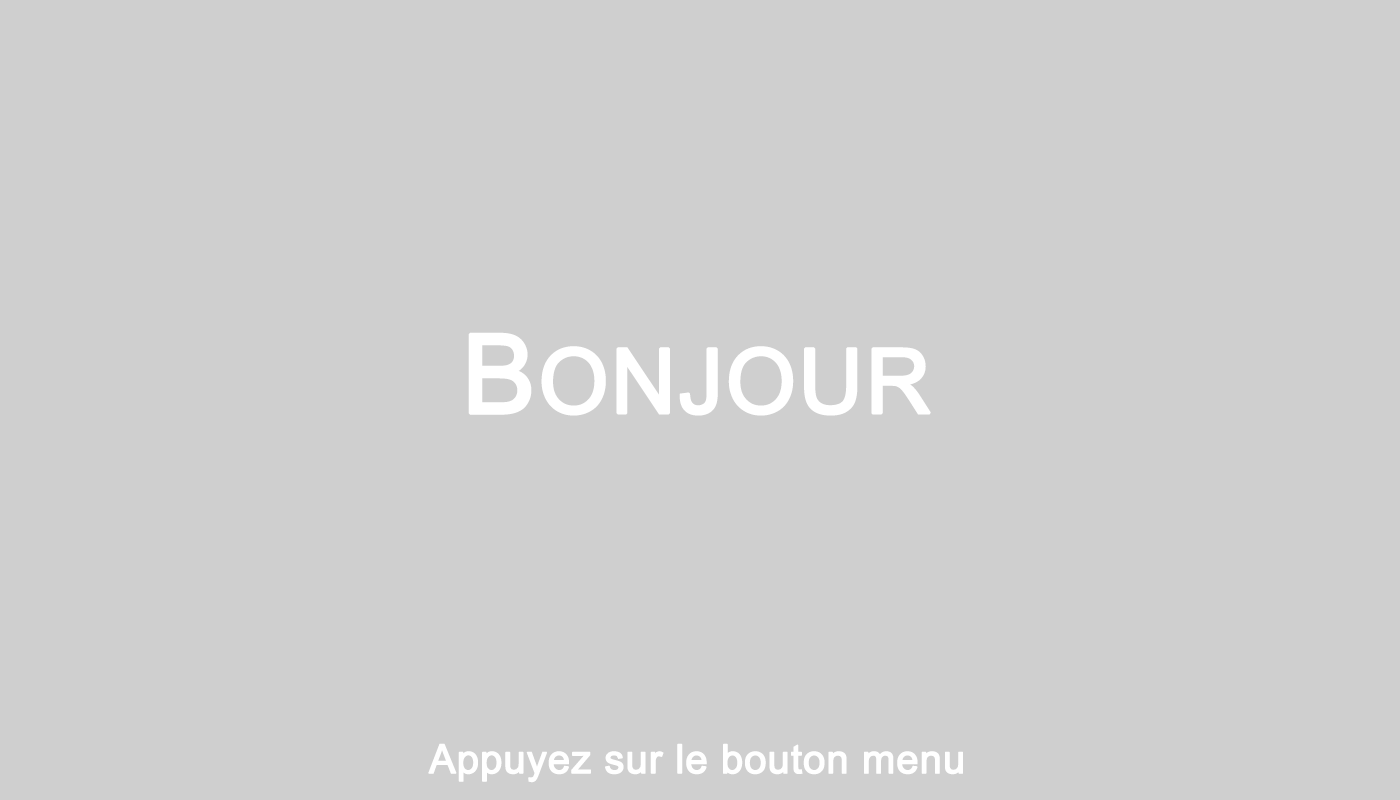
<style>
.page{position:relative;width:1400px;height:800px;background:#cfcfcf}
.page>*{position:absolute;margin:0}
.t1{font:40px "ArialMT";color:#ffffff;font-weight:bold}
.t2{font:110px "ArialMT";color:#ffffff;font-weight:bold}
.t3{font:90px "ArialMT";color:#ffffff;font-weight:bold}
</style>
<div class="page">
<p class="t1" style="left:428px;top:332px;width:535px;height:451px;text-align:center"><span class="t2">B</span><span class="t3">ONJOUR<br><br><br></span><br><br>Appuyez sur le bouton menu</p>
</div>
